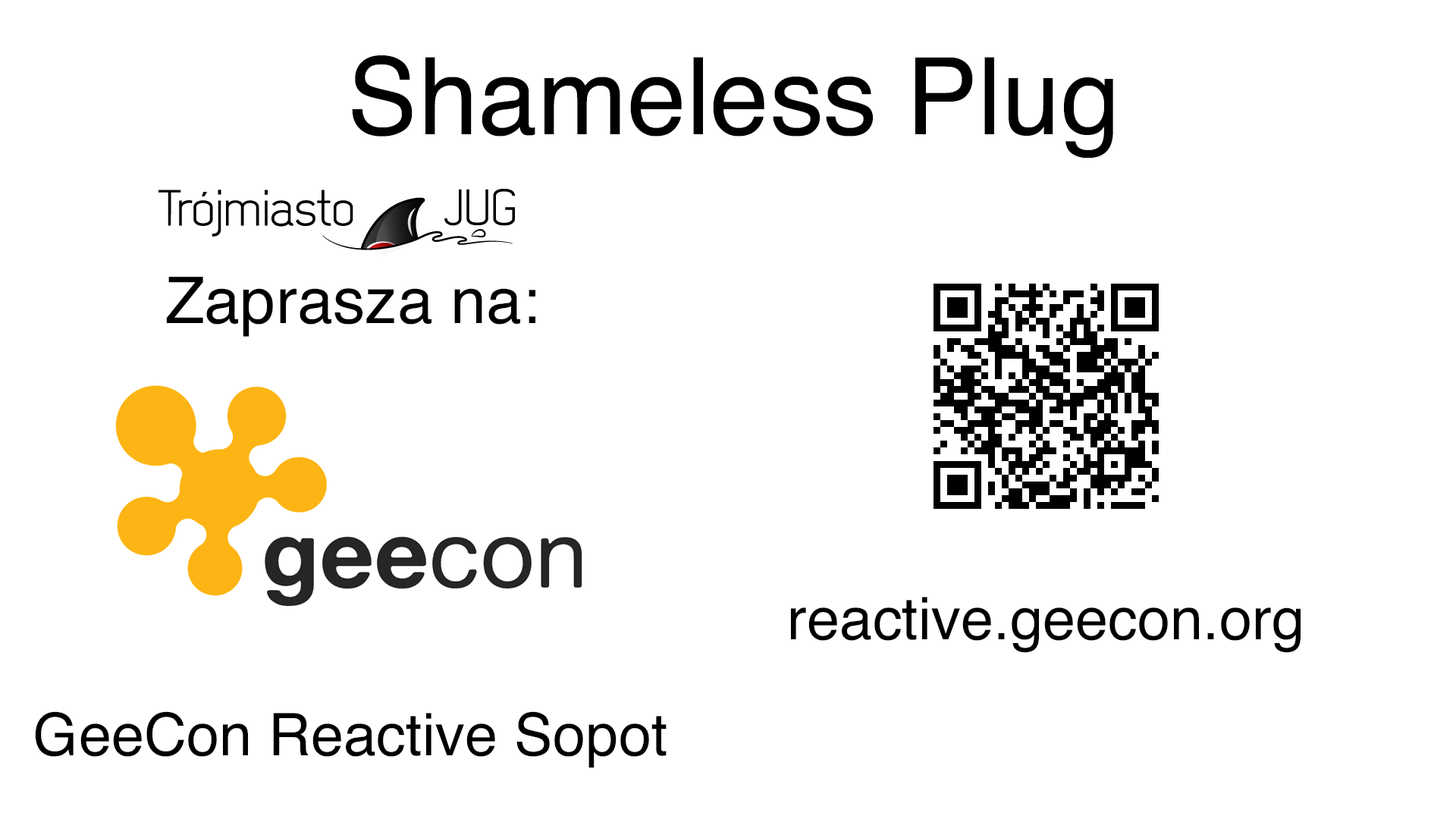
<style>
.page{position:relative;width:1456px;height:819px;background:#ffffff}
.page>*{position:absolute;margin:0}
.t1{font:107px "Helvetica";color:#000000}
.t2{font:64.2px "Helvetica";color:#000000}
.t3{font:58.9px "Helvetica";color:#000000}
</style>
<div class="page">
<p class="t1" style="left:352px;top:55px;width:761px;height:103px">Shameless Plug</p>
<p class="t2" style="left:166px;top:277px;width:369px;height:60px">Zaprasza na:</p>
<p class="t3" style="left:791px;top:597px;width:510px;height:56px">reactive.geecon.org</p>
<p class="t3" style="left:35px;top:711px;width:632px;height:57px">GeeCon Reactive Sopot</p>
</div>
